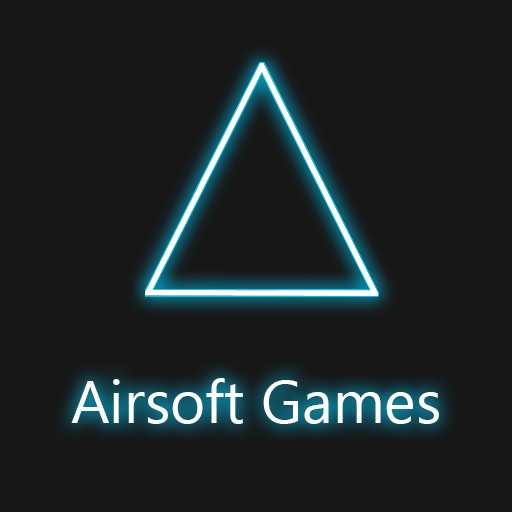
<style>
.page{position:relative;width:512px;height:512px;background:#171717}
.page>*{position:absolute;margin:0}
.t1{font:60px "SegoeUI";color:#ffffff}
</style>
<div class="page">
<p class="t1" style="left:71px;top:378px;width:368px;height:46px">Airsoft Games</p>
</div>
